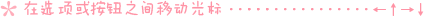
<style>
.page{position:relative;width:424px;height:17px;background:#ffffff}
.page>*{position:absolute;margin:0}
.t1{font:18px "¢è?";color:#ff93a5}
</style>
<div class="page">
<p class="t1" style="left:24px;top:0px;width:197px;height:16px">在选项或按钮之间移动光标</p>
</div>
